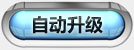
<style>
.page{position:relative;width:134px;height:50px}
.page>*{position:absolute;margin:0}
.t1{font:18px "MicrosoftYaHei";color:#0a171d}
</style>
<div class="page">
<p class="t1" style="left:33px;top:16px;width:70px;height:18px">自动升级</p>
</div>
